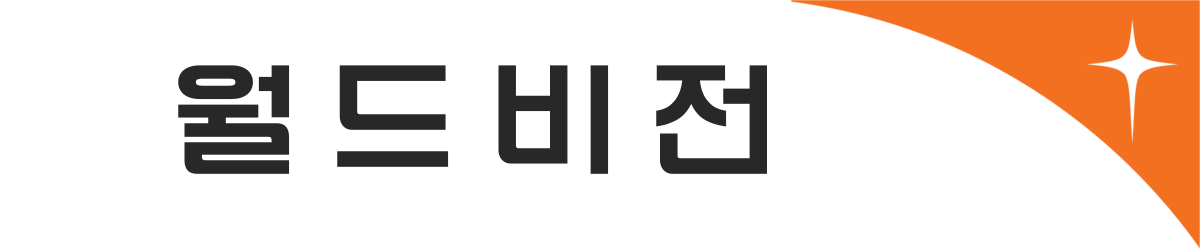
<style>
.page{position:relative;width:1200px;height:248px;background:#ffffff}
.page>*{position:absolute;margin:0}
.t1{font:125px "KIMM_Bold";letter-spacing:-0.005em;color:#282828}
</style>
<div class="page">
<p class="t1" style="left:178px;top:65px;width:589px;height:109px">월 드 비 전</p>
</div>
